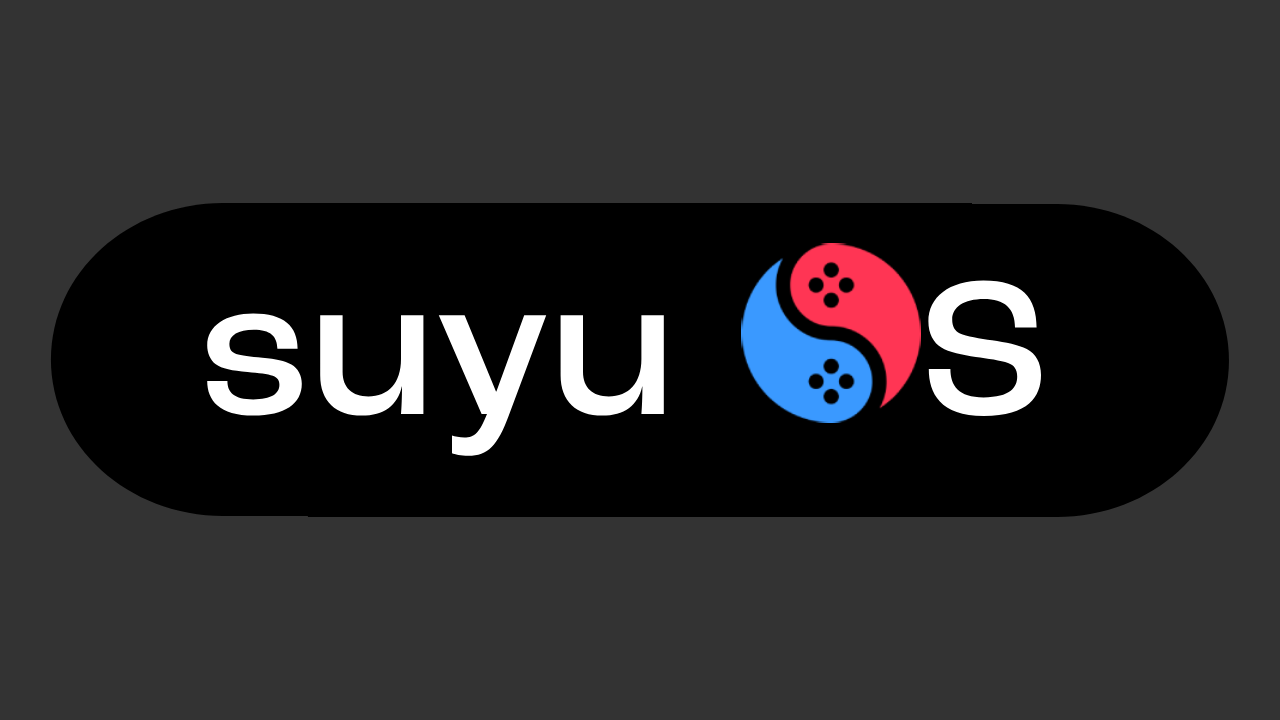
<style>
.page{position:relative;width:1280px;height:720px;background:#333333}
.page>*{position:absolute;margin:0}
.t1{font:200px "FONTSPRINGDEMO-RocGroteskMediumRegular";color:#ffffff}
.t2{font:200px "FONTSPRINGDEMO-RocGroteskMediumRegular";color:#000000}
</style>
<div class="page">
<p class="t1" style="left:207px;top:280px;width:834px;height:176px">suyu  <span class="t2">O</span>S</p>
</div>
